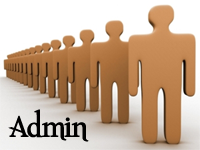
<style>
.page{position:relative;width:200px;height:150px;background:#ffffff}
.page>*{position:absolute;margin:0}
.t1{font:30px "RomanceFatalSerifStd-Bold";color:#000000}
</style>
<div class="page">
<p class="t1" style="left:8px;top:109px;width:81px;height:33px">Admin</p>
</div>
